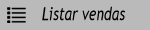
<style>
.page{position:relative;width:150px;height:30px;background:#bababa}
.page>*{position:absolute;margin:0}
.t1{font:18.2px "TrebuchetMS-Italic";color:#000000;scale:0.77 1}
</style>
<div class="page">
<p class="t1" style="left:42px;top:6px;width:83px;height:15px">Listar vendas</p>
</div>
